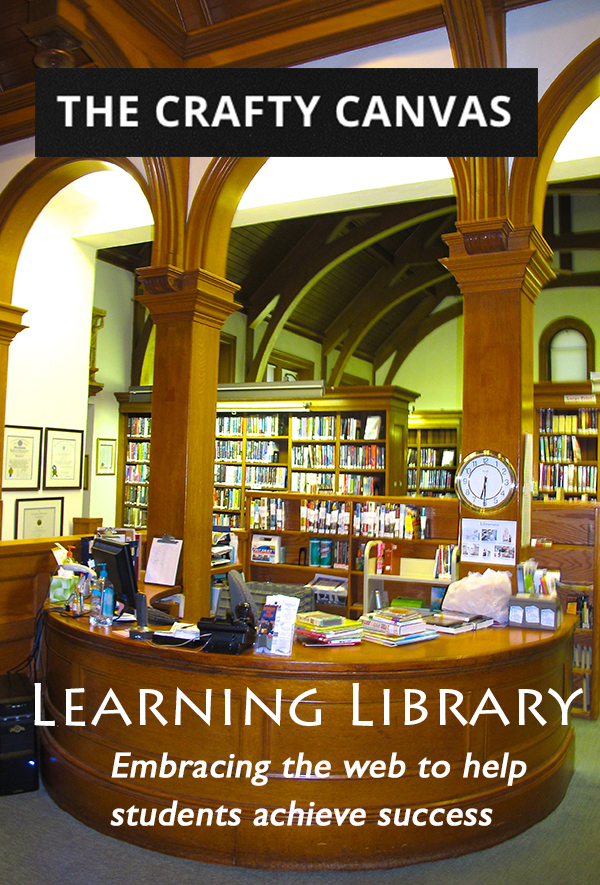
<style>
.page{position:relative;width:600px;height:885px}
.page>*{position:absolute;margin:0}
.t1{font:60px "LithosPro-Regular";color:#ffffff}
.t2{font:36px/48px "GillSansMT";color:#fefefe;font-weight:bold;font-style:italic}
</style>
<div class="page">
<p class="t1" style="left:34px;top:683px;width:549px;height:43px">Learning Library</p>
<p class="t2" style="left:110px;top:752px;width:417px;height:74px">Embracing the web to help<br>students achieve success</p>
</div>
